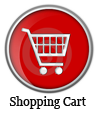
<style>
.page{position:relative;width:100px;height:120px;background:#ffffff}
.page>*{position:absolute;margin:0}
.t1{font:12px "Georgia";color:#090909}
</style>
<div class="page">
<p class="t1" style="left:9px;top:96px;width:77px;height:13px">Shopping Cart</p>
</div>
